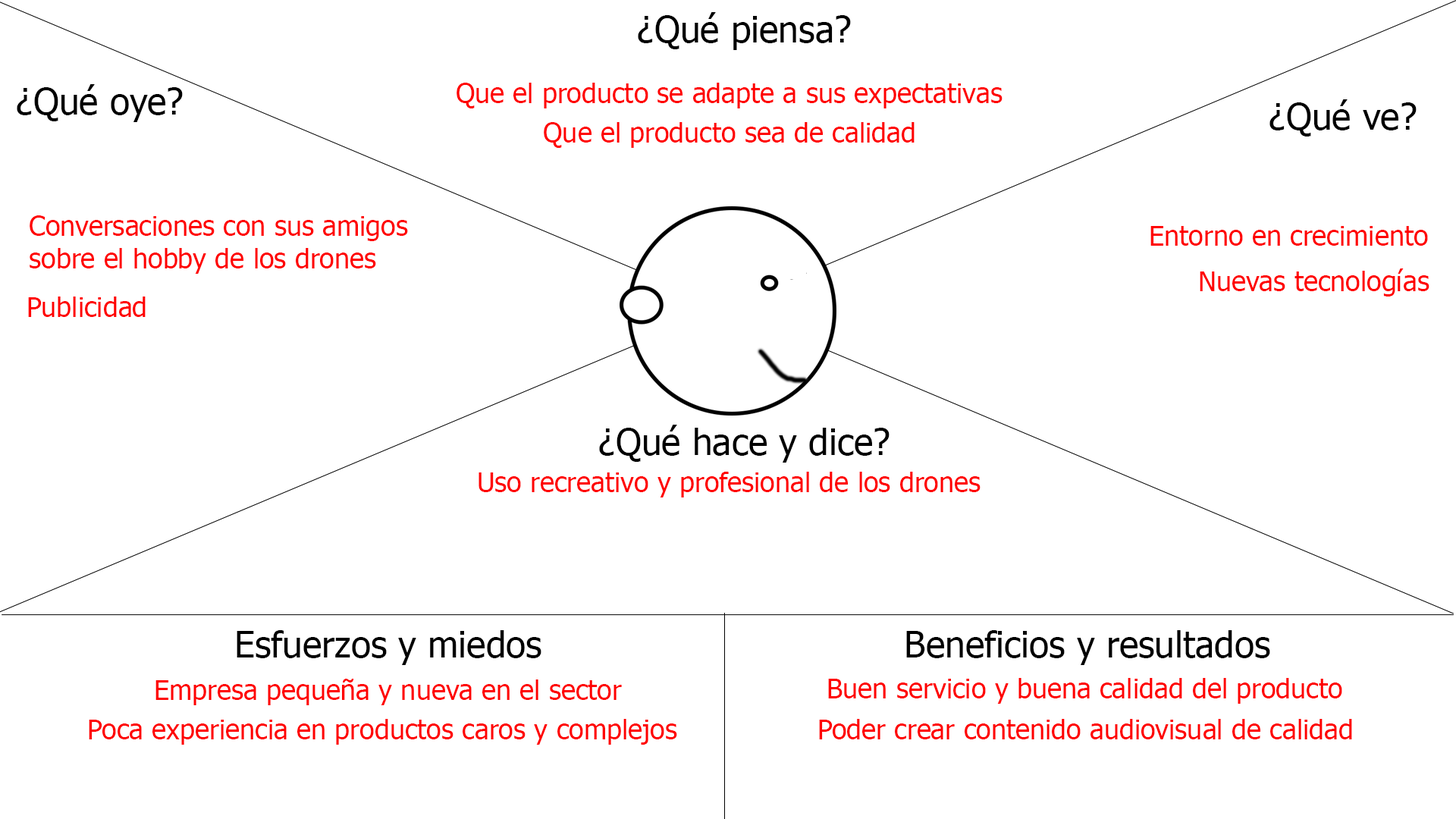
<style>
.page{position:relative;width:1456px;height:819px;background:#ffffff}
.page>*{position:absolute;margin:0}
.t1{font:36.4px "Tahoma";color:#000000}
.t2{font:27.3px "Tahoma";color:#ff0000}
</style>
<div class="page">
<p class="t1" style="left:638px;top:12px;width:213px;height:38px">¿Qué piensa?</p>
<p class="t1" style="left:17px;top:84px;width:166px;height:38px">¿Qué oye?</p>
<p class="t2" style="left:457px;top:83px;width:546px;height:25px">Que el producto se adapte a sus expectativas</p>
<p class="t1" style="left:1269px;top:99px;width:148px;height:37px">¿Qué ve?</p>
<p class="t2" style="left:544px;top:122px;width:371px;height:26px">Que el producto sea de calidad</p>
<p class="t2" style="left:30px;top:215px;width:378px;height:59px">Conversaciones con sus amigos<br>sobre el hobby de los drones</p>
<p class="t2" style="left:1150px;top:226px;width:278px;height:20px">Entorno en crecimiento</p>
<p class="t2" style="left:1200px;top:268px;width:229px;height:29px">Nuevas tecnologías</p>
<p class="t2" style="left:28px;top:297px;width:118px;height:20px">Publicidad</p>
<p class="t1" style="left:599px;top:425px;width:291px;height:38px">¿Qué hace y dice?</p>
<p class="t2" style="left:479px;top:472px;width:502px;height:25px">Uso recreativo y profesional de los drones</p>
<p class="t1" style="left:237px;top:630px;width:304px;height:35px">Esfuerzos y miedos</p>
<p class="t1" style="left:906px;top:630px;width:364px;height:35px">Beneficios y resultados</p>
<p class="t2" style="left:828px;top:678px;width:514px;height:26px">Buen servicio y buena calidad del producto</p>
<p class="t2" style="left:155px;top:679px;width:467px;height:26px">Empresa pequeña y nueva en el sector</p>
<p class="t2" style="left:89px;top:719px;width:588px;height:26px">Poca experiencia en productos caros y complejos</p>
<p class="t2" style="left:819px;top:719px;width:533px;height:20px">Poder crear contenido audiovisual de calidad</p>
</div>
